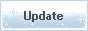
<style>
.page{position:relative;width:88px;height:31px;background:#ffffff}
.page>*{position:absolute;margin:0}
.t1{font:12px "TrebuchetMS-Bold";color:#4b4e50}
</style>
<div class="page">
<p class="t1" style="left:24px;top:11px;width:39px;height:11px">Update</p>
</div>
